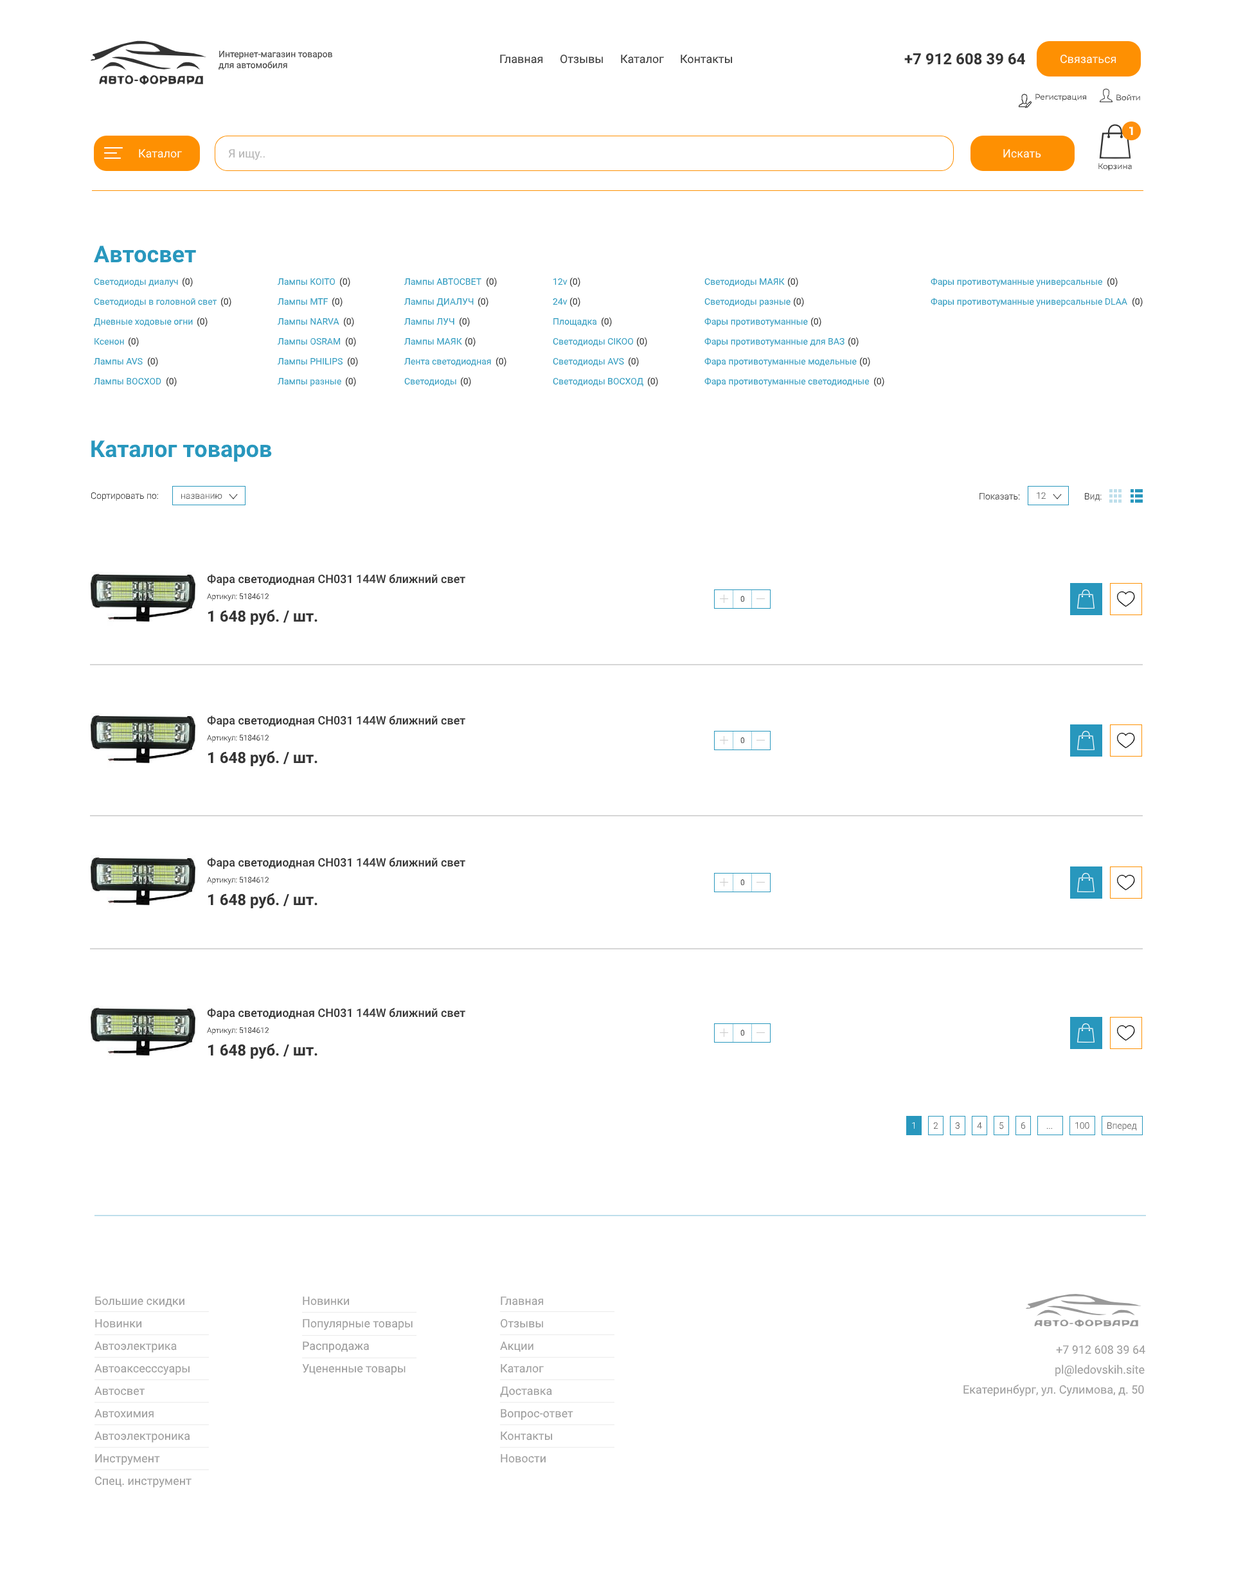
<style>
.page{position:relative;width:1234px;height:1571px;background:#ffffff}
.page>*{position:absolute;margin:0}
.t1{font:9px "Roboto-Regular";color:#333333}
.t2{font:15.4px "Roboto-Bold";color:#333333}
.t3{font:11.6px "Roboto-Regular";color:#333333}
.t4{font:11.6px "Roboto-Regular";color:#ffffff}
.t5{font:7.7px "Montserrat-Regular";color:#333333}
.t6{font:11.6px "Montserrat-Bold";color:#ffffff}
.t7{font:11.6px "Roboto-Regular";color:#b2b2b2}
.t8{font:23.1px "Roboto-Bold";color:#2897bd}
.t9{font:9px "Roboto-Regular";color:#2897bd}
.t10{font:9px "Roboto-Light";color:#333333}
.t11{font:9px "Roboto-Light";color:#5c5c5c}
.t12{font:9px "Roboto-Light";color:#5e5e5e}
.t13{font:11.6px "Roboto-Medium";color:#333333}
.t14{font:7.7px "Roboto-Light";color:#333333}
.t15{font:9px "Roboto-Light";color:#ffffff}
.t16{font:11.6px "Roboto-Regular";color:#999999}
</style>
<div class="page">
<p class="t1" style="left:219px;top:51px;width:113px;height:19px">Интернет-магазин товаров для автомобиля</p>
<p class="t2" style="left:905px;top:53px;width:120px;height:12px">+7 912 608 39 64</p>
<p class="t3" style="left:500px;top:55px;width:43px;height:9px">Главная</p>
<p class="t3" style="left:561px;top:55px;width:42px;height:9px">Отзывы</p>
<p class="t3" style="left:621px;top:55px;width:43px;height:9px">Каталог</p>
<p class="t3" style="left:681px;top:55px;width:52px;height:9px">Контакты</p>
<p class="t4" style="left:1061px;top:55px;width:56px;height:9px">Связаться</p>
<p class="t5" style="left:1036px;top:94px;width:50px;height:8px">Регистрация</p>
<p class="t5" style="left:1117px;top:94px;width:23px;height:7px">Войти</p>
<p class="t6" style="left:1130px;top:127px;width:3px;height:8px">1</p>
<p class="t4" style="left:139px;top:149px;width:43px;height:9px">Каталог</p>
<p class="t7" style="left:228px;top:149px;width:37px;height:11px">Я ищу..</p>
<p class="t4" style="left:1004px;top:149px;width:37px;height:9px">Искать</p>
<p class="t5" style="left:1099px;top:163px;width:33px;height:8px">Корзина</p>
<p class="t8" style="left:94px;top:246px;width:102px;height:17px">Автосвет</p>
<p class="t9" style="left:94px;top:278px;width:84px;height:9px">Светодиоды диалуч</p>
<p class="t1" style="left:182px;top:277px;width:11px;height:10px">(0)</p>
<p class="t9" style="left:278px;top:278px;width:58px;height:7px">Лампы KOITO</p>
<p class="t1" style="left:339px;top:277px;width:11px;height:10px">(0)</p>
<p class="t9" style="left:404px;top:278px;width:78px;height:7px">Лампы АВТОСВЕТ</p>
<p class="t1" style="left:486px;top:277px;width:11px;height:10px">(0)</p>
<p class="t9" style="left:554px;top:278px;width:14px;height:7px">12v</p>
<p class="t1" style="left:570px;top:277px;width:10px;height:10px">(0)</p>
<p class="t9" style="left:705px;top:278px;width:80px;height:9px">Светодиоды МАЯК</p>
<p class="t1" style="left:788px;top:277px;width:10px;height:10px">(0)</p>
<p class="t9" style="left:931px;top:278px;width:171px;height:9px">Фары противотуманные универсальные</p>
<p class="t1" style="left:1107px;top:277px;width:11px;height:10px">(0)</p>
<p class="t9" style="left:94px;top:298px;width:123px;height:9px">Светодиоды в головной свет</p>
<p class="t1" style="left:221px;top:297px;width:10px;height:10px">(0)</p>
<p class="t9" style="left:278px;top:298px;width:50px;height:7px">Лампы MTF</p>
<p class="t1" style="left:332px;top:297px;width:11px;height:10px">(0)</p>
<p class="t9" style="left:404px;top:298px;width:70px;height:9px">Лампы ДИАЛУЧ</p>
<p class="t1" style="left:478px;top:297px;width:11px;height:10px">(0)</p>
<p class="t9" style="left:553px;top:298px;width:15px;height:7px">24v</p>
<p class="t1" style="left:570px;top:297px;width:10px;height:10px">(0)</p>
<p class="t9" style="left:705px;top:298px;width:86px;height:9px">Светодиоды разные</p>
<p class="t1" style="left:793px;top:297px;width:11px;height:10px">(0)</p>
<p class="t9" style="left:931px;top:298px;width:197px;height:9px">Фары противотуманные универсальные DLAA</p>
<p class="t1" style="left:1132px;top:297px;width:11px;height:10px">(0)</p>
<p class="t1" style="left:197px;top:317px;width:11px;height:10px">(0)</p>
<p class="t1" style="left:343px;top:317px;width:11px;height:10px">(0)</p>
<p class="t1" style="left:459px;top:317px;width:11px;height:10px">(0)</p>
<p class="t1" style="left:601px;top:317px;width:11px;height:10px">(0)</p>
<p class="t9" style="left:705px;top:318px;width:103px;height:9px">Фары противотуманные</p>
<p class="t1" style="left:811px;top:317px;width:11px;height:10px">(0)</p>
<p class="t9" style="left:94px;top:318px;width:99px;height:9px">Дневные ходовые огни</p>
<p class="t9" style="left:278px;top:318px;width:61px;height:7px">Лампы NARVA</p>
<p class="t9" style="left:404px;top:318px;width:51px;height:7px">Лампы ЛУЧ</p>
<p class="t9" style="left:554px;top:318px;width:43px;height:9px">Площадка</p>
<p class="t9" style="left:94px;top:338px;width:30px;height:7px">Ксенон</p>
<p class="t1" style="left:128px;top:337px;width:11px;height:10px">(0)</p>
<p class="t9" style="left:278px;top:338px;width:63px;height:7px">Лампы OSRAM</p>
<p class="t1" style="left:345px;top:337px;width:11px;height:10px">(0)</p>
<p class="t9" style="left:404px;top:338px;width:58px;height:7px">Лампы МАЯК</p>
<p class="t1" style="left:465px;top:337px;width:11px;height:10px">(0)</p>
<p class="t9" style="left:553px;top:338px;width:81px;height:8px">Светодиоды CIKOO</p>
<p class="t1" style="left:636px;top:337px;width:11px;height:10px">(0)</p>
<p class="t9" style="left:705px;top:338px;width:140px;height:8px">Фары противотуманные для ВАЗ</p>
<p class="t1" style="left:848px;top:337px;width:11px;height:10px">(0)</p>
<p class="t9" style="left:94px;top:357px;width:49px;height:8px">Лампы AVS</p>
<p class="t1" style="left:147px;top:357px;width:11px;height:10px">(0)</p>
<p class="t9" style="left:278px;top:357px;width:65px;height:8px">Лампы PHILIPS</p>
<p class="t1" style="left:347px;top:357px;width:11px;height:10px">(0)</p>
<p class="t9" style="left:404px;top:358px;width:87px;height:8px">Лента светодиодная</p>
<p class="t1" style="left:496px;top:357px;width:11px;height:10px">(0)</p>
<p class="t9" style="left:553px;top:357px;width:71px;height:9px">Светодиоды AVS</p>
<p class="t1" style="left:628px;top:357px;width:11px;height:10px">(0)</p>
<p class="t9" style="left:705px;top:357px;width:152px;height:9px">Фара противотуманные модельные</p>
<p class="t1" style="left:860px;top:357px;width:10px;height:10px">(0)</p>
<p class="t9" style="left:94px;top:377px;width:67px;height:8px">Лампы BOCXOD</p>
<p class="t1" style="left:166px;top:377px;width:11px;height:10px">(0)</p>
<p class="t1" style="left:345px;top:377px;width:11px;height:10px">(0)</p>
<p class="t9" style="left:404px;top:377px;width:52px;height:9px">Светодиоды</p>
<p class="t1" style="left:460px;top:377px;width:11px;height:10px">(0)</p>
<p class="t9" style="left:553px;top:377px;width:91px;height:9px">Светодиоды ВОСХОД</p>
<p class="t1" style="left:647px;top:377px;width:11px;height:10px">(0)</p>
<p class="t9" style="left:705px;top:377px;width:165px;height:9px">Фара противотуманные светодиодные</p>
<p class="t1" style="left:874px;top:377px;width:11px;height:10px">(0)</p>
<p class="t9" style="left:278px;top:378px;width:63px;height:8px">Лампы разные</p>
<p class="t8" style="left:91px;top:440px;width:181px;height:22px">Каталог товаров</p>
<p class="t10" style="left:91px;top:492px;width:67px;height:9px">Сортировать по:</p>
<p class="t11" style="left:181px;top:494px;width:41px;height:6px">названию</p>
<p class="t10" style="left:980px;top:493px;width:40px;height:7px">Показать:</p>
<p class="t12" style="left:1037px;top:492px;width:9px;height:7px">12</p>
<p class="t10" style="left:1085px;top:493px;width:17px;height:8px">Вид:</p>
<p class="t13" style="left:207px;top:574px;width:258px;height:12px">Фара светодиодная CH031 144W ближний свет</p>
<p class="t14" style="left:207px;top:593px;width:62px;height:8px">Артикул: 5184612</p>
<p class="t14" style="left:741px;top:596px;width:3px;height:6px">0</p>
<p class="t2" style="left:208px;top:609px;width:110px;height:17px">1 648 руб. / шт.</p>
<p class="t13" style="left:207px;top:716px;width:258px;height:11px">Фара светодиодная CH031 144W ближний свет</p>
<p class="t14" style="left:207px;top:735px;width:62px;height:7px">Артикул: 5184612</p>
<p class="t14" style="left:741px;top:737px;width:3px;height:7px">0</p>
<p class="t2" style="left:208px;top:751px;width:110px;height:16px">1 648 руб. / шт.</p>
<p class="t13" style="left:207px;top:858px;width:258px;height:11px">Фара светодиодная CH031 144W ближний свет</p>
<p class="t14" style="left:207px;top:877px;width:62px;height:8px">Артикул: 5184612</p>
<p class="t14" style="left:741px;top:879px;width:3px;height:7px">0</p>
<p class="t2" style="left:208px;top:893px;width:110px;height:16px">1 648 руб. / шт.</p>
<p class="t13" style="left:207px;top:1008px;width:258px;height:12px">Фара светодиодная CH031 144W ближний свет</p>
<p class="t14" style="left:207px;top:1027px;width:62px;height:8px">Артикул: 5184612</p>
<p class="t14" style="left:741px;top:1030px;width:3px;height:6px">0</p>
<p class="t2" style="left:208px;top:1043px;width:110px;height:16px">1 648 руб. / шт.</p>
<p class="t11" style="left:933px;top:1122px;width:6px;height:7px">2</p>
<p class="t11" style="left:955px;top:1122px;width:5px;height:8px">3</p>
<p class="t11" style="left:1021px;top:1122px;width:5px;height:8px">6</p>
<p class="t11" style="left:1076px;top:1122px;width:14px;height:8px">100</p>
<p class="t15" style="left:912px;top:1122px;width:3px;height:7px">1</p>
<p class="t11" style="left:977px;top:1122px;width:5px;height:7px">4</p>
<p class="t11" style="left:1000px;top:1122px;width:4px;height:8px">5</p>
<p class="t11" style="left:1047px;top:1128px;width:5px;height:2px">...</p>
<p class="t11" style="left:1108px;top:1122px;width:29px;height:9px">Вперед</p>
<p class="t16" style="left:95px;top:1297px;width:89px;height:10px">Большие скидки</p>
<p class="t16" style="left:303px;top:1297px;width:46px;height:9px">Новинки</p>
<p class="t16" style="left:501px;top:1297px;width:43px;height:9px">Главная</p>
<p class="t16" style="left:95px;top:1319px;width:46px;height:9px">Новинки</p>
<p class="t16" style="left:303px;top:1319px;width:110px;height:11px">Популярные товары</p>
<p class="t16" style="left:501px;top:1319px;width:42px;height:9px">Отзывы</p>
<p class="t16" style="left:94px;top:1342px;width:83px;height:11px">Автоэлектрика</p>
<p class="t16" style="left:303px;top:1342px;width:66px;height:11px">Распродажа</p>
<p class="t16" style="left:500px;top:1342px;width:34px;height:10px">Акции</p>
<p class="t16" style="left:1056px;top:1346px;width:90px;height:8px">+7 912 608 39 64</p>
<p class="t16" style="left:94px;top:1364px;width:96px;height:11px">Автоаксесссуары</p>
<p class="t16" style="left:302px;top:1364px;width:104px;height:11px">Уцененные товары</p>
<p class="t16" style="left:501px;top:1364px;width:43px;height:9px">Каталог</p>
<p class="t16" style="left:1056px;top:1365px;width:89px;height:11px">pl@ledovskih.site</p>
<p class="t16" style="left:964px;top:1385px;width:180px;height:11px">Екатеринбург, ул. Сулимова, д. 50</p>
<p class="t16" style="left:94px;top:1387px;width:51px;height:9px">Автосвет</p>
<p class="t16" style="left:500px;top:1387px;width:52px;height:11px">Доставка</p>
<p class="t16" style="left:94px;top:1409px;width:60px;height:9px">Автохимия</p>
<p class="t16" style="left:501px;top:1409px;width:72px;height:11px">Вопрос-ответ</p>
<p class="t16" style="left:94px;top:1432px;width:96px;height:11px">Автоэлектроника</p>
<p class="t16" style="left:501px;top:1432px;width:52px;height:9px">Контакты</p>
<p class="t16" style="left:95px;top:1454px;width:65px;height:11px">Инструмент</p>
<p class="t16" style="left:501px;top:1454px;width:45px;height:9px">Новости</p>
<p class="t16" style="left:95px;top:1477px;width:97px;height:11px">Спец. инструмент</p>
</div>
